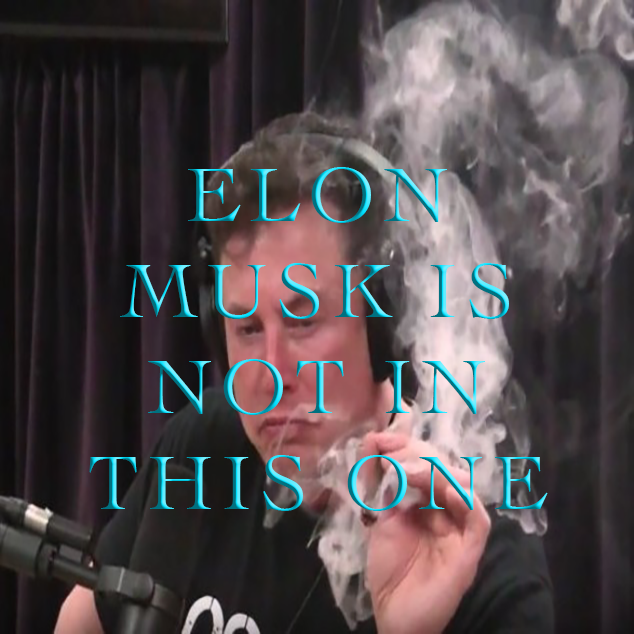
<style>
.page{position:relative;width:634px;height:634px}
.page>*{position:absolute;margin:0}
.t1{font:80px "Cochin";letter-spacing:0.1em}
</style>
<div class="page">
<p class="t1" style="left:89px;top:167px;width:459px;height:344px;text-align:center">ELON MUSK IS NOT IN THIS ONE</p>
</div>
